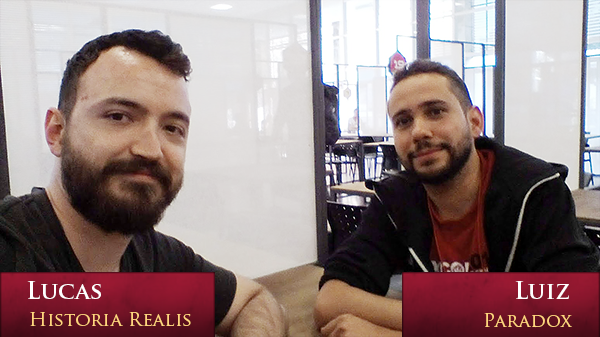
<style>
.page{position:relative;width:600px;height:337px}
.page>*{position:absolute;margin:0}
.t1{font:23.2px "TrajanPro-Bold";letter-spacing:0.01em;color:#ffffff}
.t2{font:18.6px "TrajanPro-Regular";letter-spacing:0.01em;color:#ffd67e}
</style>
<div class="page">
<p class="t1" style="left:27px;top:281px;width:74px;height:18px">Lucas</p>
<p class="t1" style="left:515px;top:281px;width:54px;height:18px">Luiz</p>
<p class="t2" style="left:30px;top:312px;width:161px;height:14px">Historia Realis</p>
<p class="t2" style="left:484px;top:313px;width:88px;height:15px">Paradox</p>
</div>
